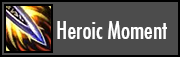
<style>
.page{position:relative;width:180px;height:57px;background:#4c4c4c}
.page>*{position:absolute;margin:0}
.t1{font:24px "FuturaCondensed";color:#ffffff}
</style>
<div class="page">
<p class="t1" style="left:57px;top:21px;width:110px;height:18px">Heroic Moment</p>
</div>
